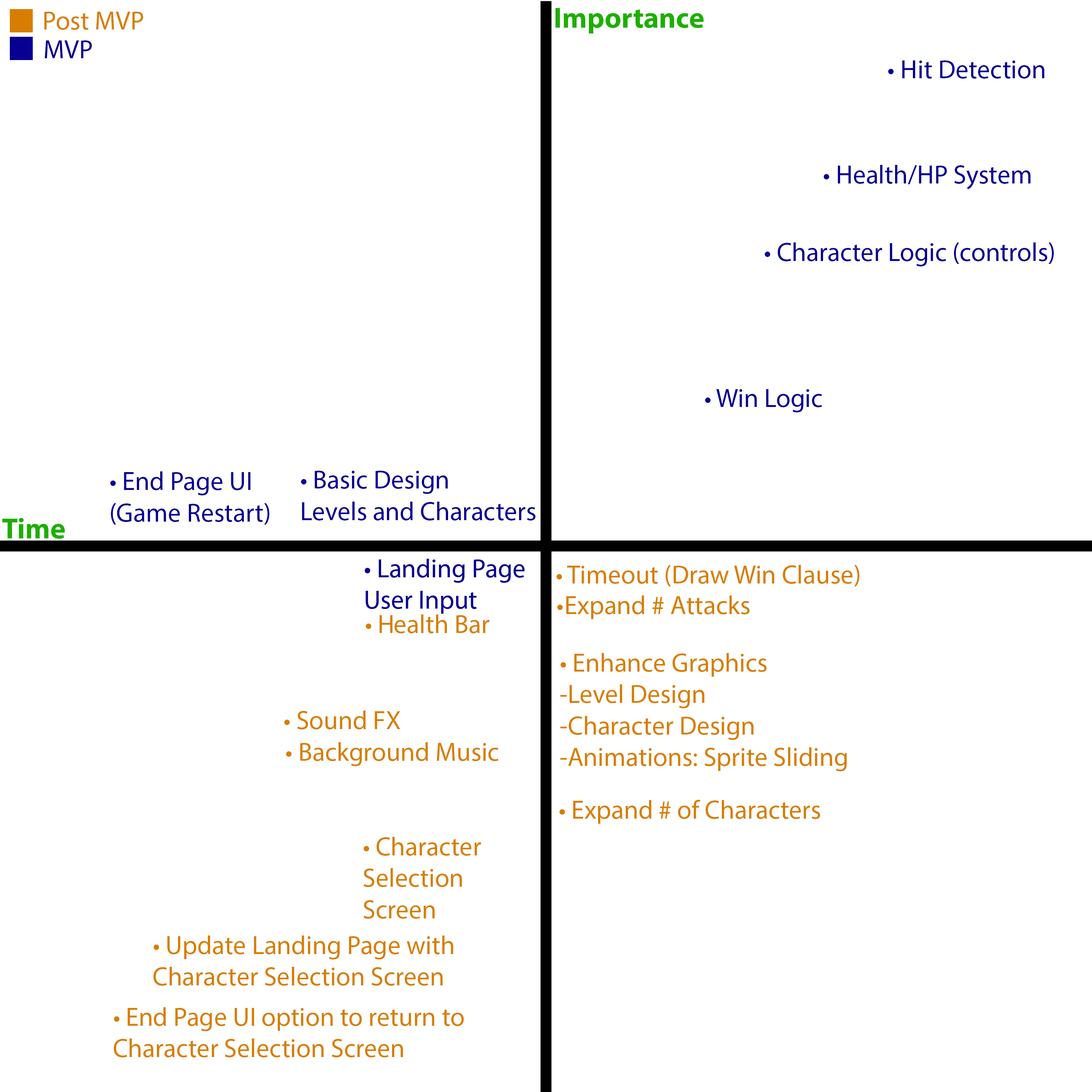
<style>
.page{position:relative;width:1092px;height:1092px;background:#ffffff}
.page>*{position:absolute;margin:0}
.t1{font:26.2px "MyriadPro-Regular";color:#d77e00}
.t2{font:29.1px "MyriadPro-Bold";color:#1daf00}
.t3{font:26.2px "MyriadPro-Regular";color:#070091}
</style>
<div class="page">
<p class="t1" style="left:44px;top:12px;width:99px;height:18px">Post MVP</p>
<p class="t2" style="left:555px;top:8px;width:149px;height:25px">Importance</p>
<p class="t3" style="left:45px;top:40px;width:47px;height:18px">MVP</p>
<p class="t3" style="left:888px;top:60px;width:156px;height:19px">• Hit Detection</p>
<p class="t3" style="left:824px;top:165px;width:206px;height:24px">• Health/HP System</p>
<p class="t3" style="left:765px;top:242px;width:289px;height:24px">• Character Logic (controls)</p>
<p class="t3" style="left:705px;top:389px;width:117px;height:23px">• Win Logic</p>
<p class="t3" style="left:110px;top:471px;width:159px;height:54px">• End Page UI<br>(Game Restart)</p>
<p class="t3" style="left:301px;top:471px;width:234px;height:50px">• Basic Design<br>Levels and Characters</p>
<p class="t2" style="left:2px;top:518px;width:63px;height:21px">Time</p>
<p class="t3" style="left:365px;top:559px;width:160px;height:55px">• Landing Page<br>User Input</p>
<p class="t3" style="left:365px;top:559px;width:160px;height:55px">• Landing Page<br>User Input</p>
<p class="t1" style="left:557px;top:565px;width:302px;height:21px">• Timeout (Draw Win Clause)</p>
<p class="t1" style="left:557px;top:595px;width:192px;height:24px">•Expand # Attacks</p>
<p class="t1" style="left:366px;top:614px;width:124px;height:19px">• Health Bar</p>
<p class="t1" style="left:560px;top:653px;width:287px;height:118px">• Enhance Graphics<br>-Level Design<br>-Character Design<br>-Animations: Sprite Sliding</p>
<p class="t1" style="left:284px;top:711px;width:116px;height:18px">• Sound FX</p>
<p class="t1" style="left:286px;top:742px;width:212px;height:24px">• Background Music</p>
<p class="t1" style="left:559px;top:800px;width:261px;height:24px">• Expand # of Characters</p>
<p class="t1" style="left:364px;top:837px;width:117px;height:82px">• Character <br>Selection <br>Screen</p>
<p class="t1" style="left:153px;top:935px;width:300px;height:51px">• Update Landing Page with<br>Character Selection Screen</p>
<p class="t1" style="left:114px;top:1007px;width:350px;height:50px">• End Page UI option to return to<br>Character Selection Screen</p>
</div>
